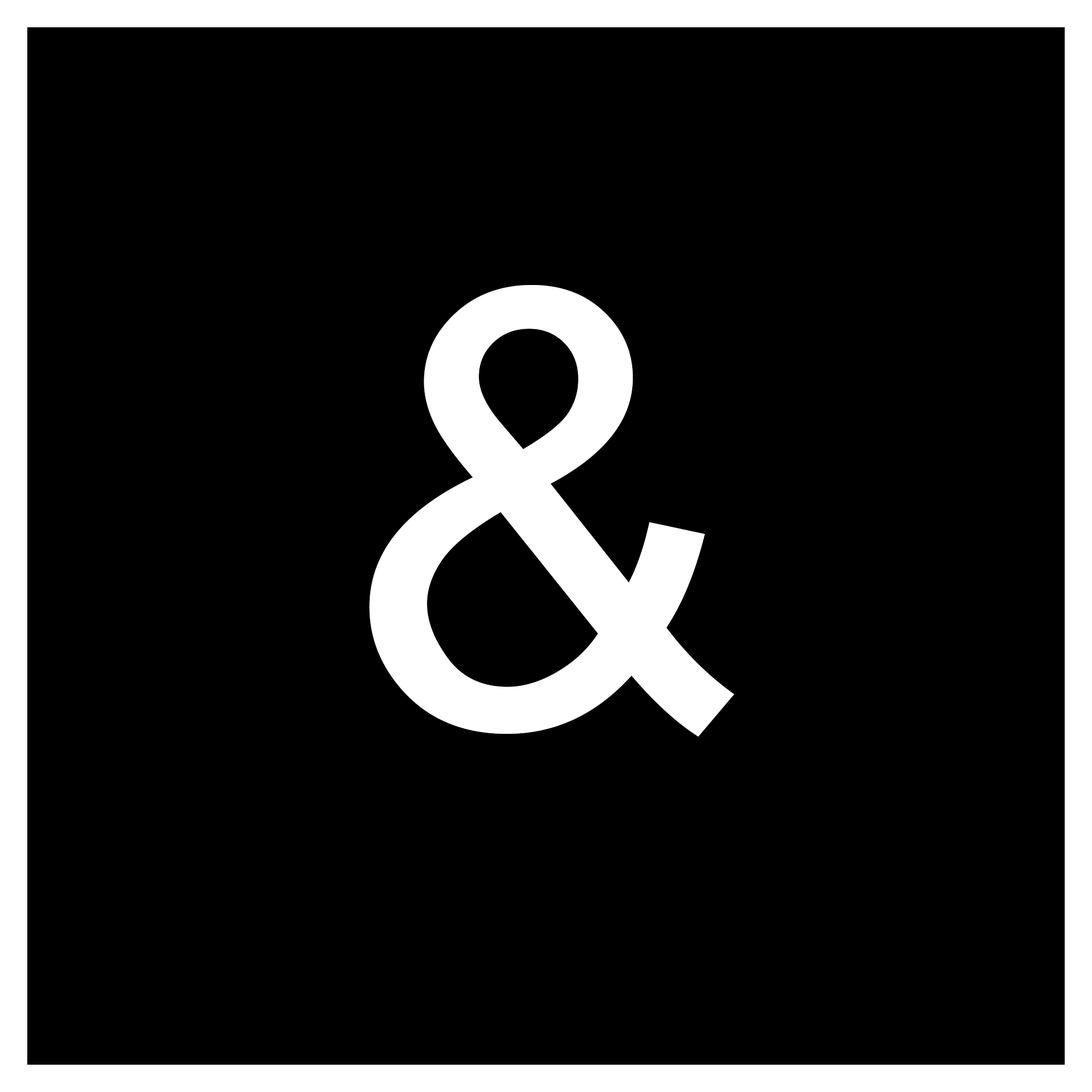
<style>
.page{position:relative;width:1092px;height:1092px;background:#000000}
.page>*{position:absolute;margin:0}
.t1{font:606.7px "ArialMT";color:#ffffff}
</style>
<div class="page">
<p class="t1" style="left:369px;top:285px;width:365px;height:452px">&amp;</p>
</div>
